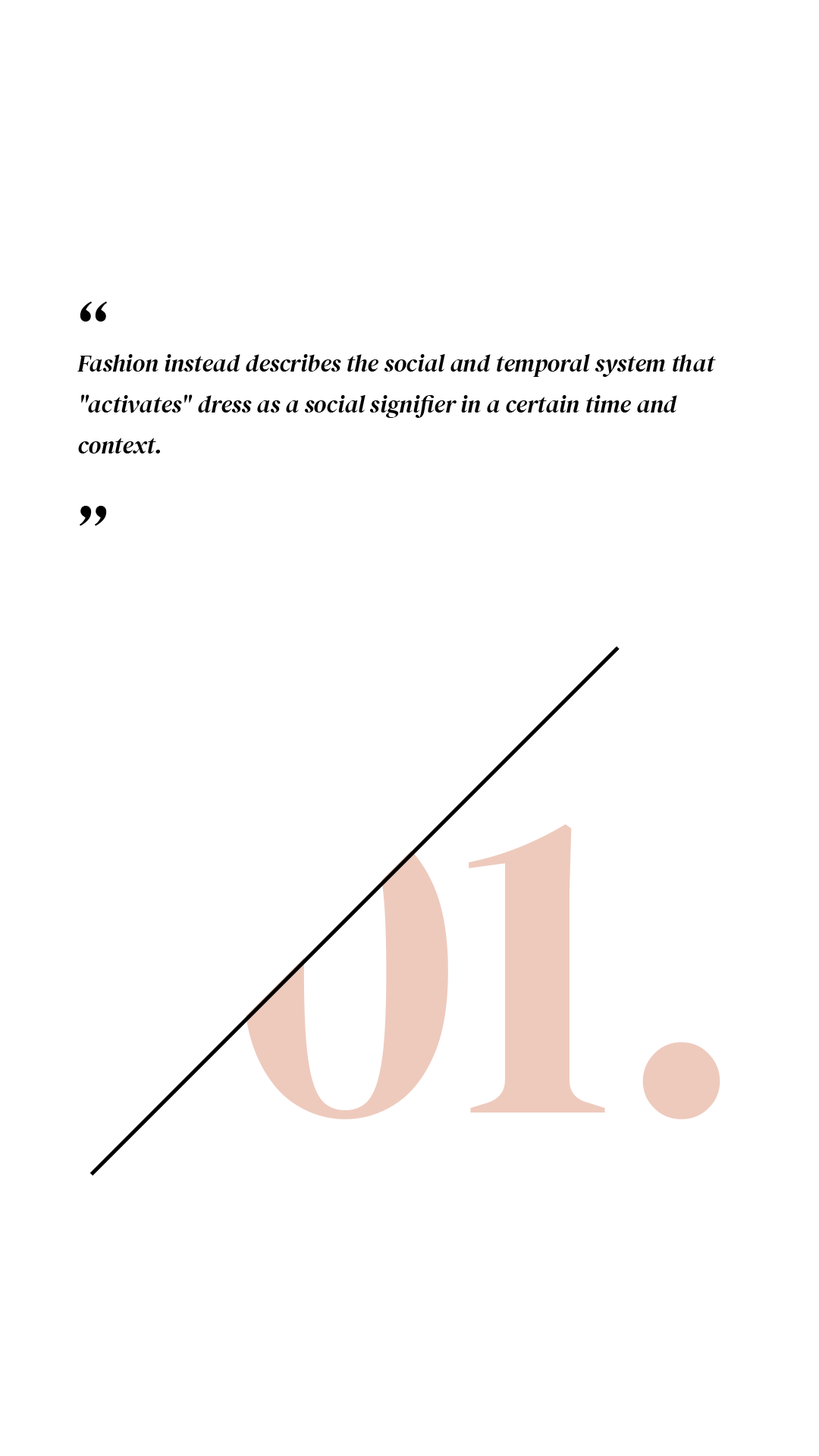
<style>
.page{position:relative;width:819px;height:1456px;background:#ffffff}
.page>*{position:absolute;margin:0}
.t1{font:72.8px "DMSerifDisplay-Italic";color:#000000}
.t2{font:24.3px/40.9px "DMSerifDisplay-Italic";color:#000000}
.t3{font:447.4px "DMSerifDisplay-Regular";color:#eecabd;text-transform:uppercase}
</style>
<div class="page">
<p class="t1" style="left:80px;top:301px;width:27px;height:21px">“</p>
<p class="t2" style="left:77px;top:354px;width:639px;height:99px">Fashion instead describes the social and temporal system that "activates" dress as a social signifier in a certain time and context.</p>
<p class="t1" style="left:80px;top:506px;width:27px;height:20px">”</p>
<p class="t3" style="left:242px;top:822px;width:478px;height:297px">01.</p>
</div>
